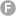
<style>
.page{position:relative;width:16px;height:16px;background:#a4a4a4}
.page>*{position:absolute;margin:0}
.t1{font:13px "DejaVuSans";color:#ffffff;font-weight:bold}
</style>
<div class="page">
<p class="t1" style="left:5px;top:3px;width:6px;height:10px">F</p>
</div>
